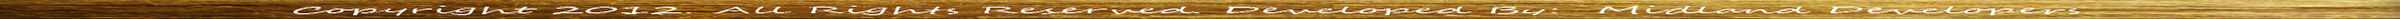
<style>
.page{position:relative;width:2400px;height:19px}
.page>*{position:absolute;margin:0}
.t1{font:9px "SegoeScript";color:#fffdfd;scale:5 1}
</style>
<div class="page">
<p class="t1" style="left:293px;top:6px;width:1787px;height:10px">Copyright 2012. All Rights Reserved. Developed By:  Midland Developers</p>
</div>
